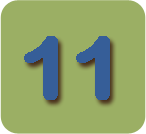
<style>
.page{position:relative;width:146px;height:134px;background:#9baf64}
.page>*{position:absolute;margin:0}
.t1{font:86.1px "ArialRoundedMTBold";letter-spacing:-0.01em;color:#365e98;font-weight:bold}
</style>
<div class="page">
<p class="t1" style="left:24px;top:36px;width:86px;height:64px">11</p>
</div>
